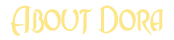
<style>
.page{position:relative;width:174px;height:40px;background:#ffffff}
.page>*{position:absolute;margin:0}
.t1{font:40.6px "Asrafel";color:#fde688;scale:0.8 1}
</style>
<div class="page">
<p class="t1" style="left:10px;top:5px;width:154px;height:31px">About Dora</p>
</div>
